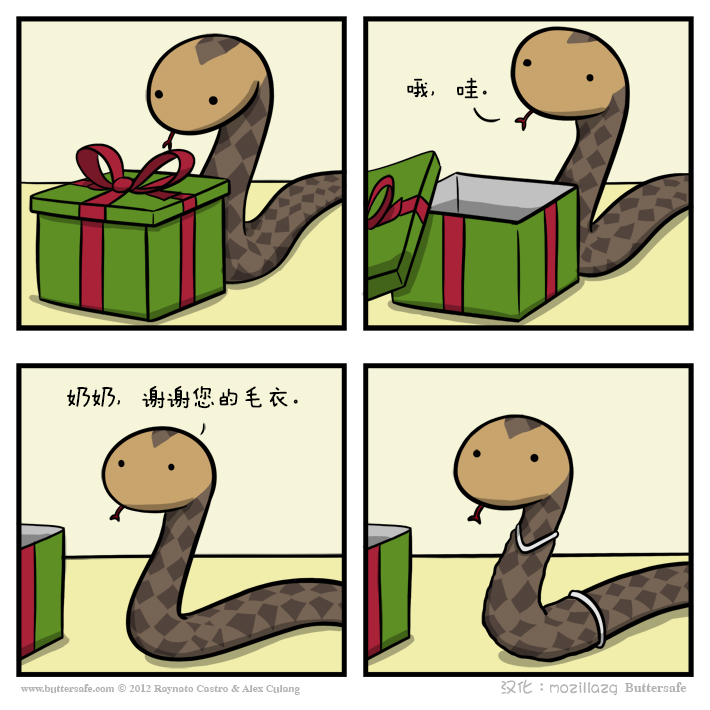
<style>
.page{position:relative;width:710px;height:710px;background:#f6f5d9}
.page>*{position:absolute;margin:0}
.t1{font:25px "FZMWJW--GB1-0";color:#000000}
.t2{font:16.7px "DFGirl";color:#b3b3b3}
</style>
<div class="page">
<p class="t1" style="left:407px;top:77px;width:80px;height:22px">哦，哇。</p>
<p class="t1" style="left:67px;top:386px;width:231px;height:23px">奶奶，谢谢您的毛衣。</p>
<p class="t2" style="left:501px;top:679px;width:116px;height:17px">汉化：mozillazg</p>
</div>
